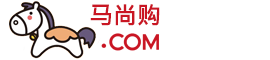
<style>
.page{position:relative;width:270px;height:60px;background:#ffffff}
.page>*{position:absolute;margin:0}
.t1{font:24px "MicrosoftJhengHeiBold";color:#c91623}
</style>
<div class="page">
<p class="t1" style="left:90px;top:4px;width:70px;height:22px">马尚购</p>
</div>
